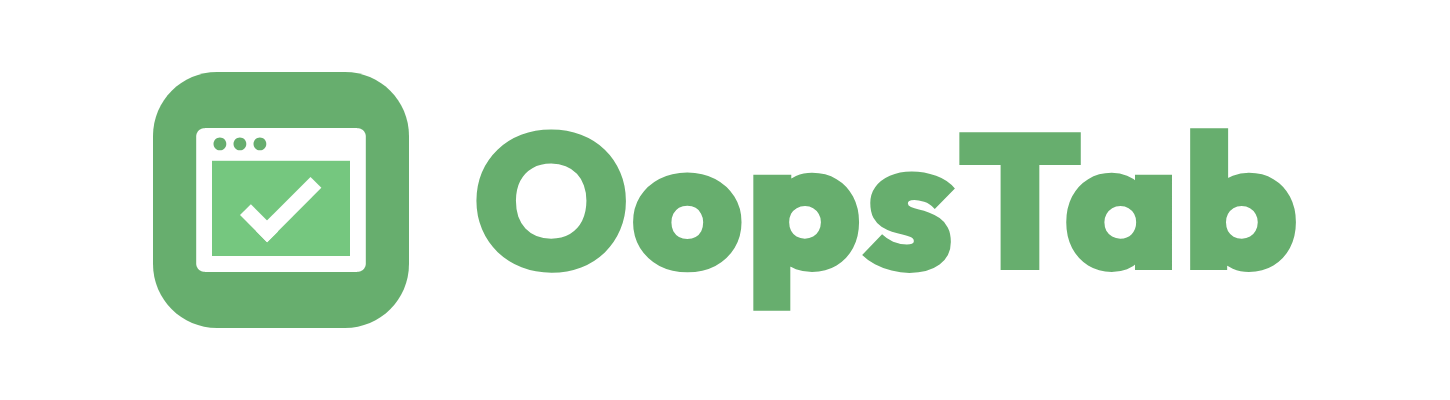
<style>
.page{position:relative;width:1450px;height:400px;background:#ffffff}
.page>*{position:absolute;margin:0}
.t1{font:193.6px "Outfit-Black";color:#67ae6e}
</style>
<div class="page">
<p class="t1" style="left:476px;top:128px;width:820px;height:183px">OopsTab</p>
</div>
